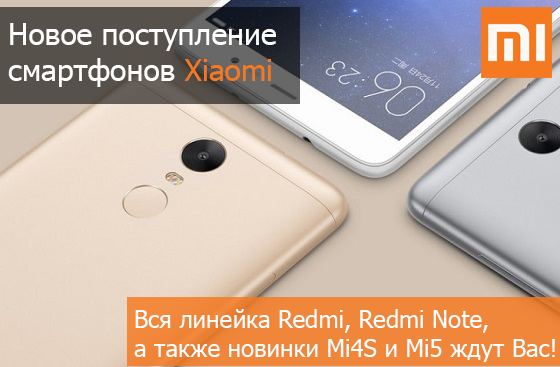
<style>
.page{position:relative;width:560px;height:367px}
.page>*{position:absolute;margin:0}
.t1{font:30px "Tahoma";color:#fefefe}
.t2{font:30px "Tahoma";color:#f57921}
.t3{font:24px "Tahoma";color:#ffffff}
</style>
<div class="page">
<p class="t1" style="left:8px;top:23px;width:268px;height:64px">Новое поступление <br>смартфонов <span class="t2">Xiaomi</span></p>
<p class="t3" style="left:134px;top:309px;width:421px;height:53px">Вся линейка Redmi, Redmi Note, <br>а также новинки Mi4S и Mi5 ждут Вас!</p>
</div>
